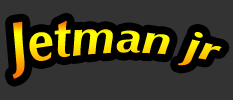
<style>
.page{position:relative;width:233px;height:100px;background:#333333}
.page>*{position:absolute;margin:0}
.t1{font:48px "Optima-BoldItalic"}
</style>
<div class="page">
<p class="t1" style="left:12px;top:20px;width:210px;height:59px">Jetman jr</p>
</div>
